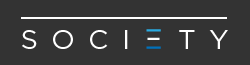
<style>
.page{position:relative;width:250px;height:65px;background:#333333}
.page>*{position:absolute;margin:0}
.t1{font:27.3px "GothamHTF-Book";letter-spacing:0.5em;color:#ffffff;text-transform:uppercase}
</style>
<div class="page">
<p class="t1" style="left:22px;top:30px;width:206px;height:19px">Soci  ty</p>
</div>
